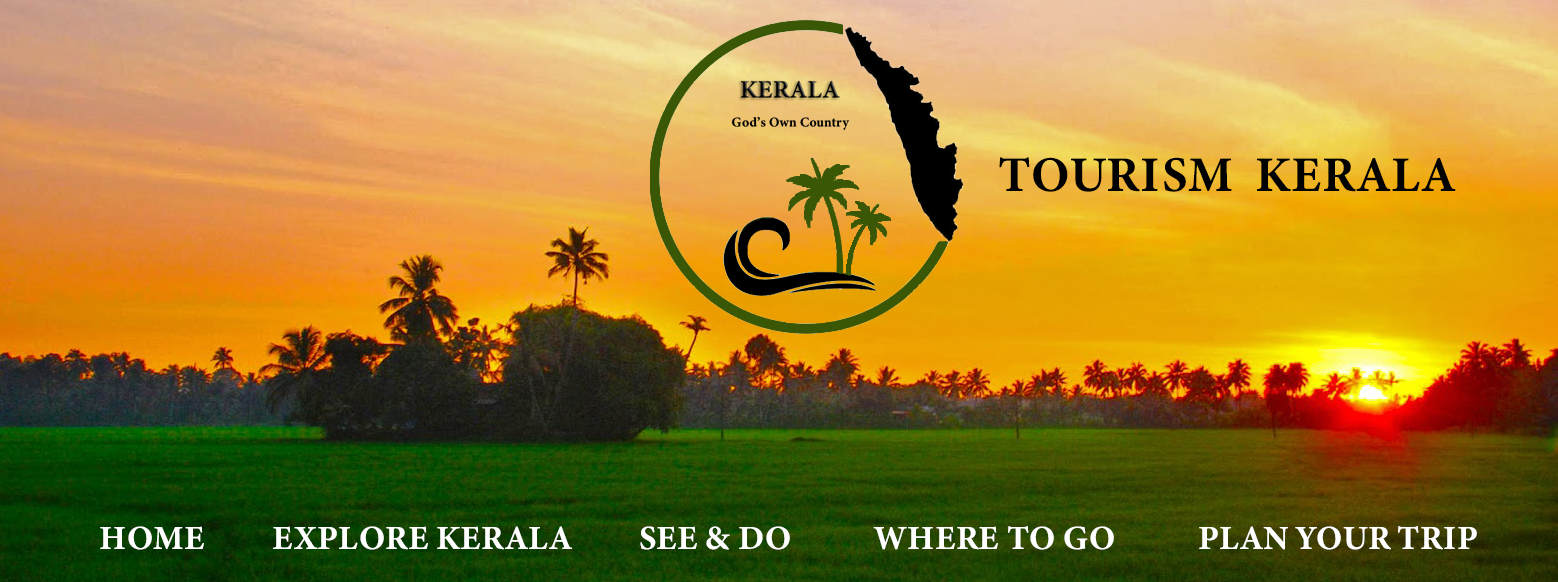
<style>
.page{position:relative;width:1558px;height:582px}
.page>*{position:absolute;margin:0}
.t1{font:50px "MinionConceptRoman-Bold";color:#000000}
.t2{font:50px "MinionConceptRoman-Bold";color:#3a5705}
.t3{font:34px "MinionConceptRoman-Bold";color:#ffffff}
</style>
<div class="page">
<p class="t1" style="left:999px;top:157px;width:457px;height:35px"><span class="t2"><br></span>TOURISM  KERALA</p>
<p class="t3" style="left:100px;top:526px;width:1377px;height:24px">HOME         EXPLORE KERALA         SEE &amp; DO           WHERE TO GO           PLAN YOUR TRIP</p>
</div>
